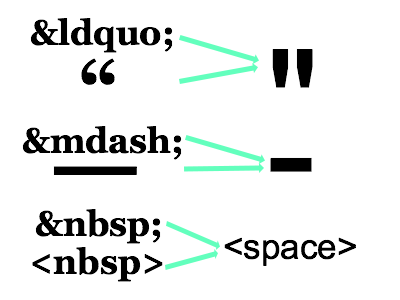
<style>
.page{position:relative;width:400px;height:300px;background:#ffffff}
.page>*{position:absolute;margin:0}
.t1{font:35px "Georgia-Bold";color:#000000}
.t2{font:150px "ArialMT";color:#000000}
.t3{font:75px "Georgia-Bold";color:#000000}
.t4{font:150.2px "ArialMT";color:#000000}
.t5{font:100px "Georgia-Bold";color:#000000}
.t6{font:35px "ArialMT";color:#000000}
</style>
<div class="page">
<p class="t1" style="left:30px;top:18px;width:143px;height:35px">&amp;ldquo;</p>
<p class="t2" style="left:272px;top:49px;width:41px;height:39px">"</p>
<p class="t3" style="left:81px;top:58px;width:34px;height:27px">“</p>
<p class="t1" style="left:22px;top:126px;width:160px;height:34px">&amp;mdash;</p>
<p class="t4" style="left:270px;top:157px;width:42px;height:15px">-</p>
<p class="t5" style="left:53px;top:166px;width:84px;height:9px">—</p>
<p class="t1" style="left:35px;top:209px;width:126px;height:35px">&amp;nbsp;</p>
<p class="t6" style="left:224px;top:237px;width:132px;height:29px">&lt;space&gt;</p>
<p class="t1" style="left:32px;top:247px;width:131px;height:35px">&lt;nbsp&gt;</p>
</div>
